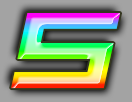
<style>
.page{position:relative;width:132px;height:102px}
.page>*{position:absolute;margin:0}
.t1{font:110.7px "FOTBullheaded";letter-spacing:0.015em;font-style:italic;scale:1.23 1}
</style>
<div class="page">
<p class="t1" style="left:11px;top:13px;width:110px;height:76px">S</p>
</div>
